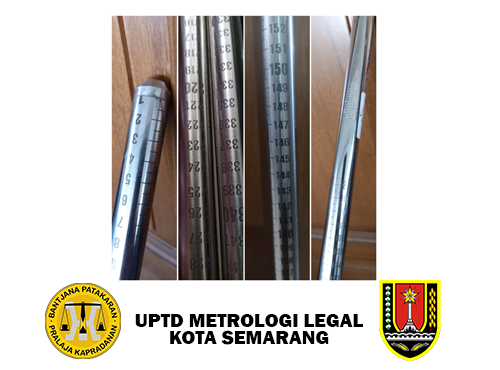
<style>
.page{position:relative;width:500px;height:370px;background:#ffffff}
.page>*{position:absolute;margin:0}
.t1{font:20px/17.4px "FranklinGothic-Heavy";color:#000000;text-transform:uppercase}
</style>
<div class="page">
<p class="t1" style="left:135px;top:314px;width:228px;height:31px;text-align:center">UPTD Metrologi Legal<br>Kota semarang</p>
</div>
